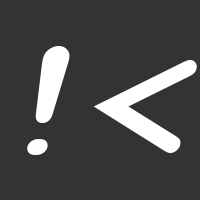
<style>
.page{position:relative;width:200px;height:200px;background:#333333}
.page>*{position:absolute;margin:0}
.t1{font:165.4px "CourierNewPS-BoldItalicMT";color:#ffffff}
</style>
<div class="page">
<p class="t1" style="left:27px;top:46px;width:170px;height:109px">!&lt;</p>
</div>
